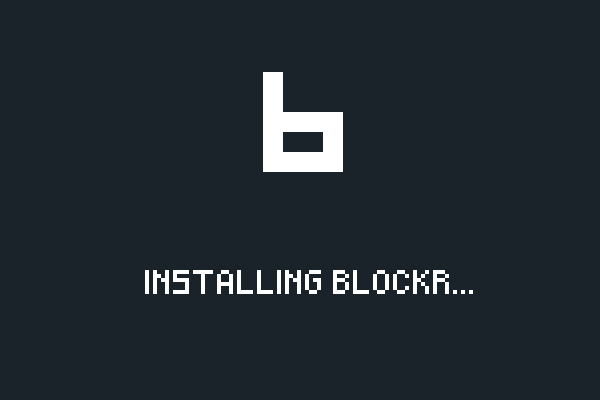
<style>
.page{position:relative;width:600px;height:400px;background:#1b232a}
.page>*{position:absolute;margin:0}
.t1{font:20px "Pixeled";color:#ffffff}
</style>
<div class="page">
<p class="t1" style="left:145px;top:270px;width:328px;height:24px">INSTALLING BLOCKR...</p>
</div>
